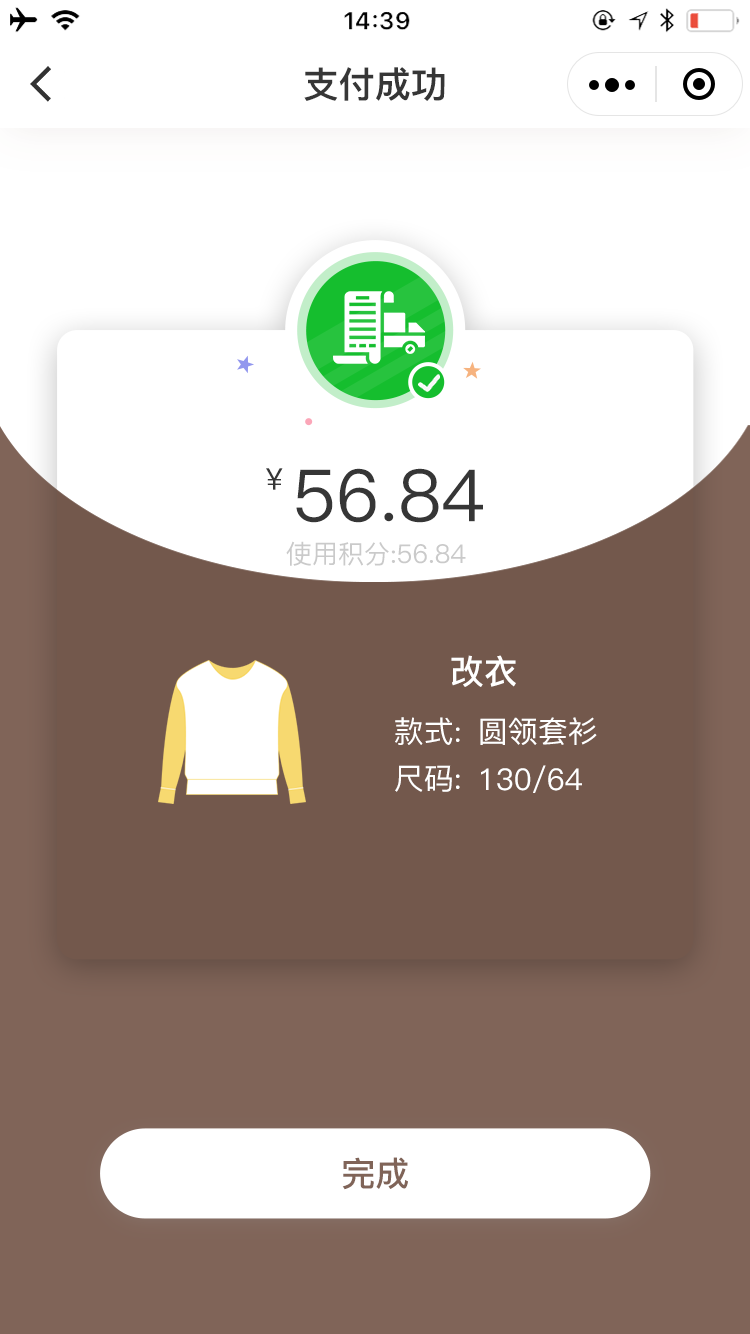
<style>
.page{position:relative;width:750px;height:1334px;background:#ffffff}
.page>*{position:absolute;margin:0}
.t1{font:36px "PingFang-SC-Heavy";color:#363636}
.t2{font:30px "PingFang-SC-Medium";color:#363636}
.t3{font:72px "PingFang-SC-Medium";color:#363636}
.t4{font:26px "PingFang-SC-Medium";color:#cacaca}
.t5{font:34px "PingFang-SC-Bold";color:#ffffff}
.t6{font:30px "PingFang-SC-Medium";color:#ffffff}
.t7{font:34px "PingFang-SC-Bold";color:#806458}
</style>
<div class="page">
<p class="t1" style="left:304px;top:67px;width:141px;height:34px">支付成功</p>
<p class="t2" style="left:266px;top:468px;width:17px;height:22px">￥</p>
<p class="t3" style="left:296px;top:468px;width:187px;height:55px">56.84</p>
<p class="t4" style="left:286px;top:541px;width:180px;height:25px">使用积分:56.84</p>
<p class="t5" style="left:451px;top:655px;width:65px;height:32px">改衣</p>
<p class="t6" style="left:395px;top:717px;width:65px;height:28px">款式:</p>
<p class="t6" style="left:480px;top:717px;width:117px;height:28px">圆领套衫</p>
<p class="t6" style="left:395px;top:765px;width:65px;height:27px">尺码:</p>
<p class="t6" style="left:481px;top:765px;width:101px;height:28px">130/64</p>
<p class="t7" style="left:342px;top:1157px;width:66px;height:33px">完成</p>
</div>
